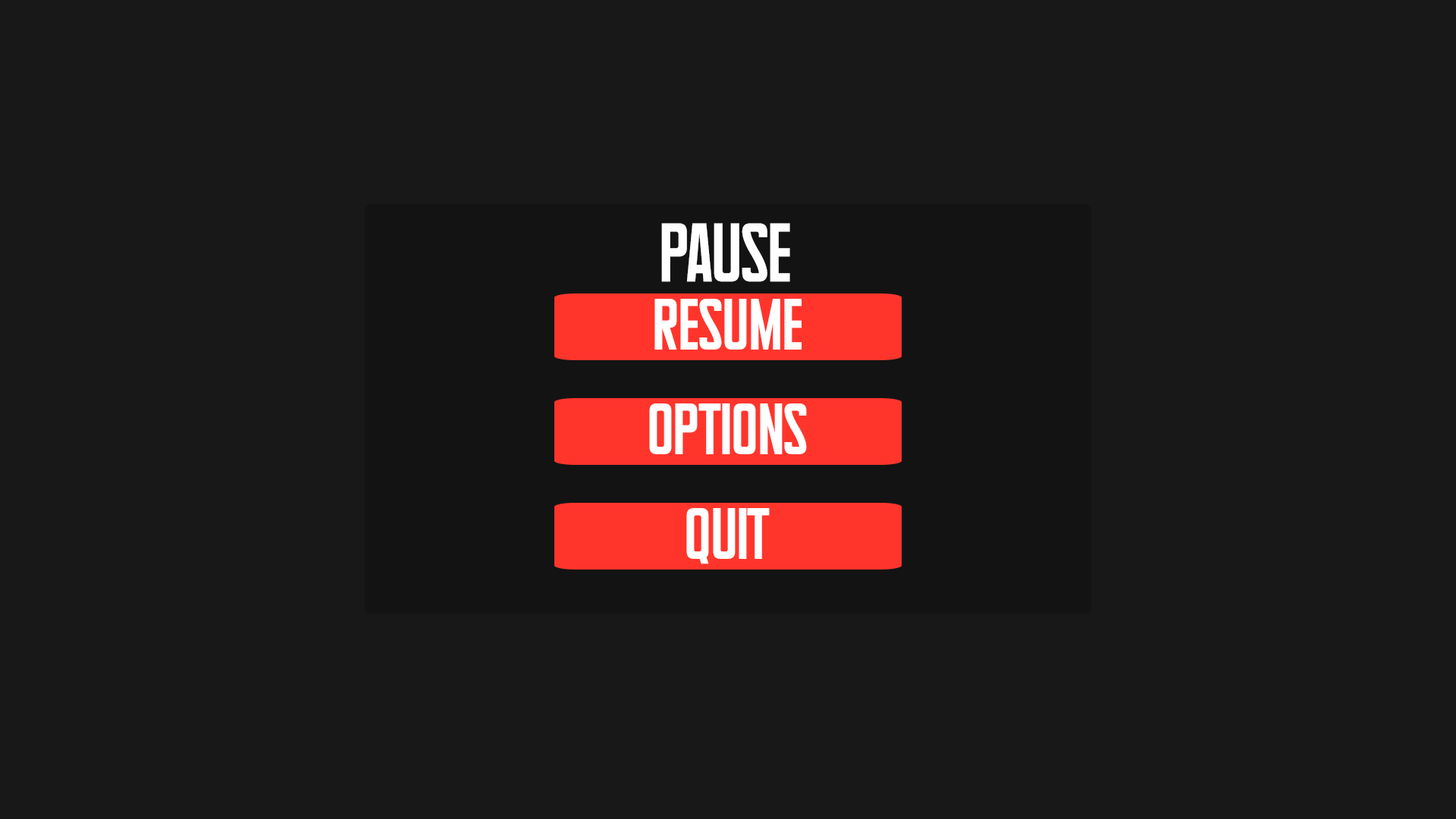
<style>
.page{position:relative;width:1456px;height:819px;background:#181818}
.page>*{position:absolute;margin:0}
.t1{font:56.8px "Supertalls";color:#ffffff}
.t2{font:49.5px "Supertalls";color:#ffffff}
</style>
<div class="page">
<p class="t1" style="left:661px;top:223px;width:129px;height:59px">pause</p>
<p class="t2" style="left:654px;top:299px;width:148px;height:51px">resume</p>
<p class="t2" style="left:649px;top:403px;width:158px;height:51px">options</p>
<p class="t2" style="left:686px;top:508px;width:84px;height:56px">quit</p>
</div>
